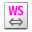
<style>
.page{position:relative;width:32px;height:32px;background:#ffffff}
.page>*{position:absolute;margin:0}
.t1{font:13px "FiraSansExtraCondensed-Medium";color:#ff00e6}
</style>
<div class="page">
<p class="t1" style="left:8px;top:5px;width:16px;height:11px">WS</p>
</div>
